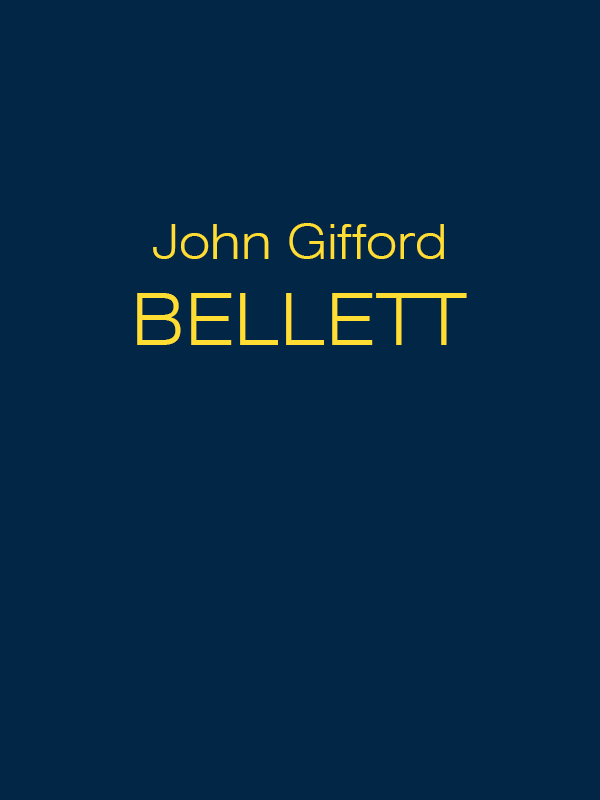
<style>
.page{position:relative;width:600px;height:800px;background:#022645}
.page>*{position:absolute;margin:0}
.t1{font:48px "Swiss721BT-LightExtended";color:#ffdd33}
.t2{font:72px "Swiss721BT-LightExtended";color:#ffdd33}
</style>
<div class="page">
<p class="t1" style="left:137px;top:223px;width:330px;height:122px;text-align:center">John Gifford<br><span class="t2">BELLETT</span></p>
</div>
